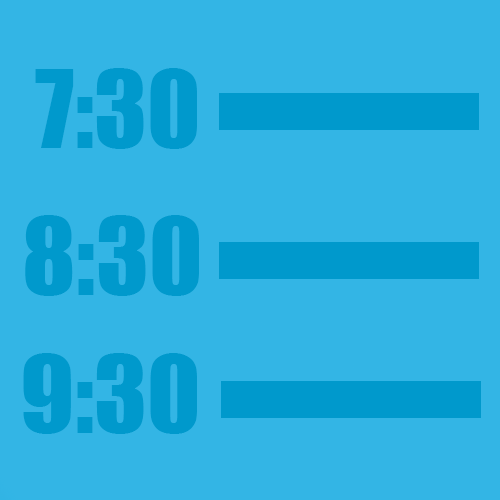
<style>
.page{position:relative;width:500px;height:500px;background:#33b5e5}
.page>*{position:absolute;margin:0}
.t1{font:100px "Impact";color:#0099cc}
</style>
<div class="page">
<p class="t1" style="left:35px;top:68px;width:162px;height:81px">7:30</p>
<p class="t1" style="left:25px;top:215px;width:174px;height:81px">8:30</p>
<p class="t1" style="left:23px;top:353px;width:174px;height:81px">9:30</p>
</div>
